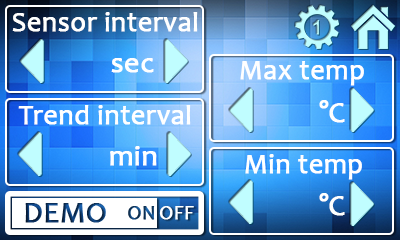
<style>
.page{position:relative;width:400px;height:240px}
.page>*{position:absolute;margin:0}
.t1{font:28px "Candara";color:#ffffff;font-weight:bold}
.t2{font:30px "Candara";color:#ffffff;font-weight:bold}
</style>
<div class="page">
<p class="t1" style="left:12px;top:12px;width:186px;height:20px">Sensor interval</p>
<p class="t2" style="left:111px;top:58px;width:43px;height:15px">sec</p>
<p class="t1" style="left:240px;top:61px;width:124px;height:25px">Max temp</p>
<p class="t2" style="left:319px;top:100px;width:26px;height:23px">°C</p>
<p class="t1" style="left:18px;top:105px;width:173px;height:20px">Trend interval</p>
<p class="t2" style="left:110px;top:146px;width:47px;height:20px">min</p>
<p class="t1" style="left:245px;top:154px;width:117px;height:26px">Min temp</p>
<p class="t2" style="left:319px;top:193px;width:26px;height:23px">°C</p>
</div>
